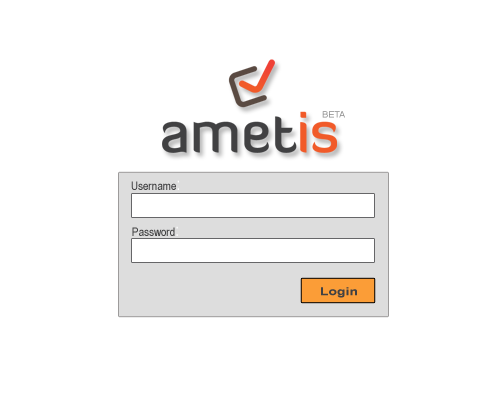
<style>
.page{position:relative;width:500px;height:402px;background:#ffffff}
.page>*{position:absolute;margin:0}
.t1{font:8.8px "ArialNarrow";color:#8a8a8a;scale:1.29 1}
.t2{font:12px "ArialNarrow";color:#414143}
.t3{font:18px "ArialNarrow";color:#ffffff}
.t4{font:12px "ArialNarrow";color:#414142}
.t5{font:11.3px "Arial-BoldMT";color:#414143;scale:1.23 1}
</style>
<div class="page">
<p class="t1" style="left:322px;top:111px;width:23px;height:7px">BETA</p>
<p class="t2" style="left:131px;top:180px;width:48px;height:10px">Username<span class="t3">:</span></p>
<p class="t4" style="left:132px;top:226px;width:46px;height:10px">Password<span class="t3">:</span></p>
<p class="t5" style="left:321px;top:287px;width:36px;height:11px">Login</p>
</div>
